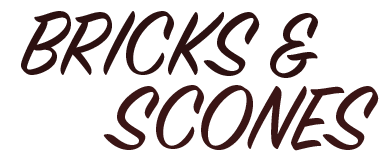
<style>
.page{position:relative;width:389px;height:167px;background:#ffffff}
.page>*{position:absolute;margin:0}
.t1{font:100px "SignPainter-HouseScript";color:#2c1111}
.t2{font:100px "SignPainter-HouseScript";color:#3a1515}
</style>
<div class="page">
<p class="t1" style="left:21px;top:11px;width:297px;height:67px">BRICKS &amp;</p>
<p class="t2" style="left:103px;top:85px;width:276px;height:66px">SCONES</p>
</div>
